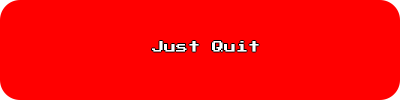
<style>
.page{position:relative;width:400px;height:100px;background:#ff0000}
.page>*{position:absolute;margin:0}
.t1{font:12px "PressStart2P";color:#ffffff}
</style>
<div class="page">
<p class="t1" style="left:152px;top:41px;width:107px;height:11px">Just Quit</p>
</div>
